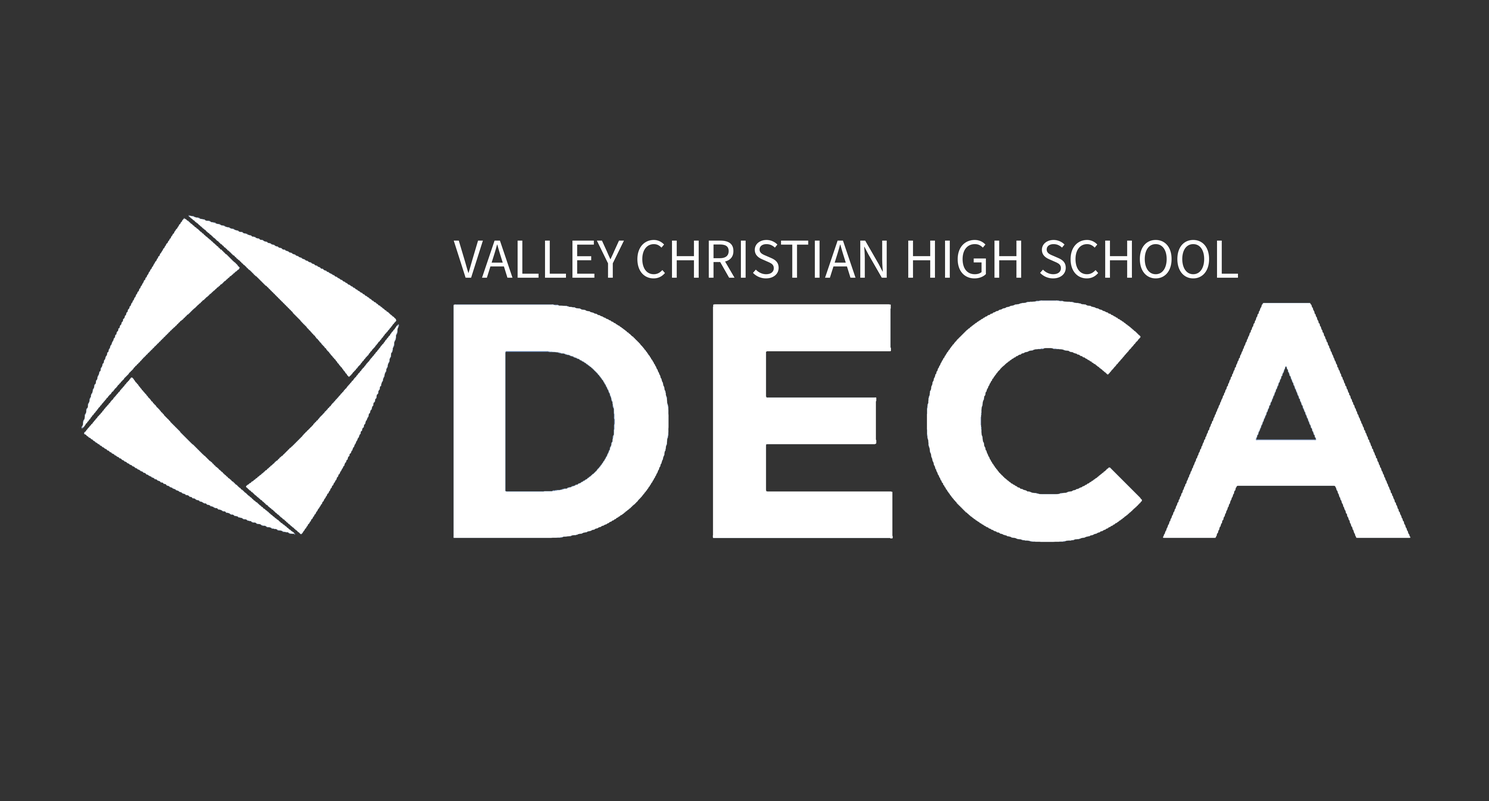
<style>
.page{position:relative;width:1489px;height:801px;background:#333333}
.page>*{position:absolute;margin:0}
.t1{font:56.5px "SourceSansRoman-Regular";color:#ffffff}
</style>
<div class="page">
<p class="t1" style="left:454px;top:240px;width:784px;height:38px">VALLEY CHRISTIAN HIGH SCHOOL</p>
</div>
